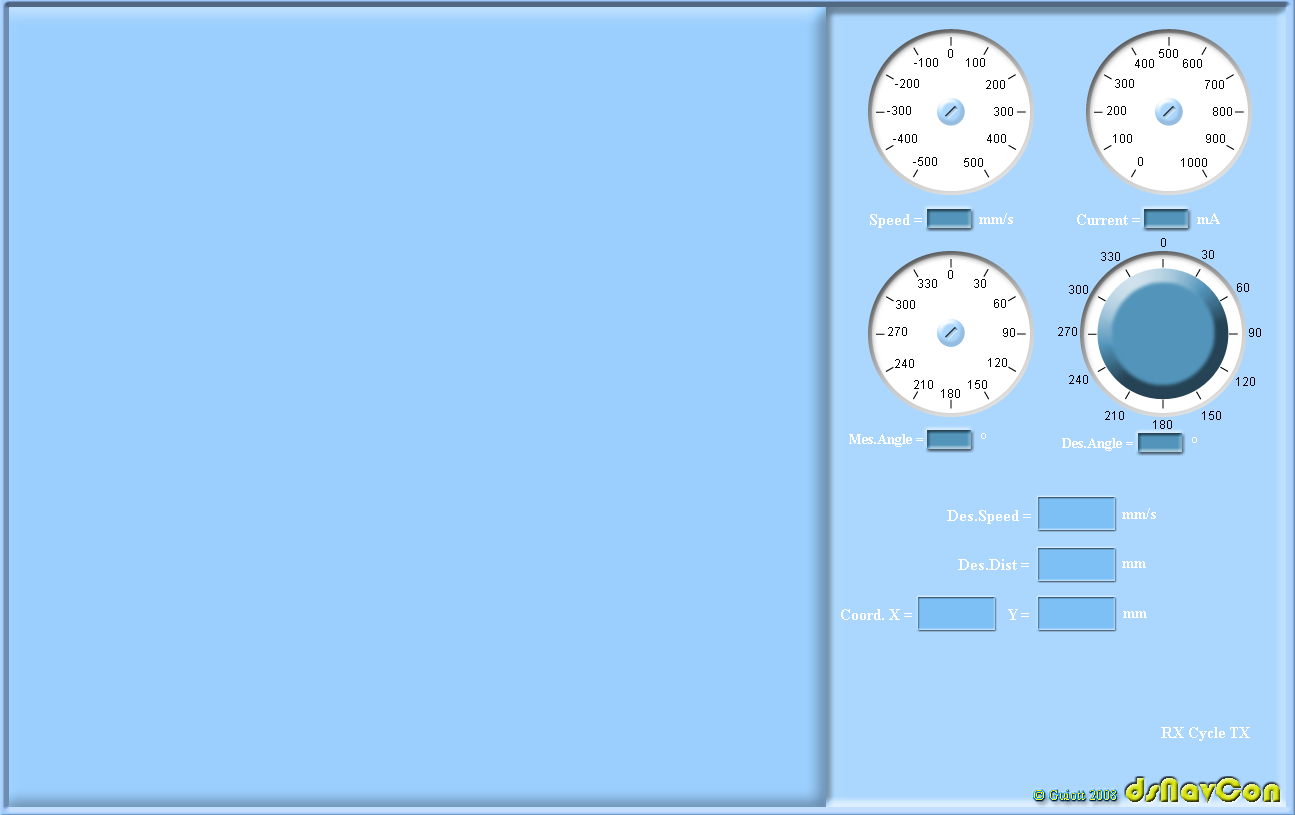
<style>
.page{position:relative;width:1295px;height:815px;background:#9bcffe}
.page>*{position:absolute;margin:0}
.t1{font:12px "ArialMT";color:#000000}
.t2{font:16px "TimesNewRomanPS-BoldMT";color:#ffffff}
.t3{font:14px "TimesNewRomanPS-BoldMT";color:#ffffff}
.t4{font:36px "Bauhaus93"}
.t5{font:14px "TimesNewRomanPSMT"}
</style>
<div class="page">
<p class="t1" style="left:948px;top:49px;width:5px;height:9px">0</p>
<p class="t1" style="left:1159px;top:49px;width:19px;height:9px">500</p>
<p class="t1" style="left:914px;top:58px;width:24px;height:9px">-100</p>
<p class="t1" style="left:966px;top:58px;width:19px;height:9px">100</p>
<p class="t1" style="left:1135px;top:59px;width:19px;height:9px">400</p>
<p class="t1" style="left:1183px;top:59px;width:19px;height:9px">600</p>
<p class="t1" style="left:895px;top:79px;width:24px;height:9px">-200</p>
<p class="t1" style="left:986px;top:80px;width:19px;height:9px">200</p>
<p class="t1" style="left:1115px;top:79px;width:19px;height:9px">300</p>
<p class="t1" style="left:1205px;top:80px;width:19px;height:9px">700</p>
<p class="t1" style="left:887px;top:106px;width:24px;height:9px">-300</p>
<p class="t1" style="left:994px;top:107px;width:19px;height:9px">300</p>
<p class="t1" style="left:1107px;top:106px;width:19px;height:9px">200</p>
<p class="t1" style="left:1213px;top:107px;width:19px;height:9px">800</p>
<p class="t1" style="left:893px;top:134px;width:24px;height:9px">-400</p>
<p class="t1" style="left:987px;top:134px;width:19px;height:9px">400</p>
<p class="t1" style="left:1113px;top:134px;width:19px;height:9px">100</p>
<p class="t1" style="left:1206px;top:134px;width:19px;height:9px">900</p>
<p class="t1" style="left:913px;top:157px;width:24px;height:9px">-500</p>
<p class="t1" style="left:964px;top:158px;width:19px;height:9px">500</p>
<p class="t1" style="left:1138px;top:157px;width:5px;height:9px">0</p>
<p class="t1" style="left:1181px;top:158px;width:26px;height:9px">1000</p>
<p class="t2" style="left:870px;top:214px;width:52px;height:14px">Speed =</p>
<p class="t2" style="left:979px;top:213px;width:34px;height:11px">mm/s</p>
<p class="t2" style="left:1077px;top:214px;width:63px;height:11px">Current =</p>
<p class="t2" style="left:1197px;top:213px;width:23px;height:11px">mA</p>
<p class="t1" style="left:1161px;top:238px;width:5px;height:9px">0</p>
<p class="t1" style="left:1101px;top:252px;width:19px;height:9px">330</p>
<p class="t1" style="left:1202px;top:250px;width:12px;height:9px">30</p>
<p class="t1" style="left:948px;top:270px;width:5px;height:9px">0</p>
<p class="t1" style="left:918px;top:279px;width:19px;height:9px">330</p>
<p class="t1" style="left:974px;top:279px;width:12px;height:9px">30</p>
<p class="t1" style="left:1069px;top:285px;width:19px;height:9px">300</p>
<p class="t1" style="left:1237px;top:283px;width:12px;height:9px">60</p>
<p class="t1" style="left:896px;top:300px;width:19px;height:9px">300</p>
<p class="t1" style="left:994px;top:299px;width:12px;height:9px">60</p>
<p class="t1" style="left:888px;top:327px;width:19px;height:9px">270</p>
<p class="t1" style="left:1003px;top:328px;width:12px;height:9px">90</p>
<p class="t1" style="left:1058px;top:327px;width:19px;height:9px">270</p>
<p class="t1" style="left:1249px;top:328px;width:12px;height:9px">90</p>
<p class="t1" style="left:895px;top:359px;width:19px;height:9px">240</p>
<p class="t1" style="left:988px;top:358px;width:19px;height:9px">120</p>
<p class="t1" style="left:1069px;top:375px;width:19px;height:9px">240</p>
<p class="t1" style="left:1236px;top:377px;width:19px;height:9px">120</p>
<p class="t1" style="left:914px;top:380px;width:19px;height:9px">210</p>
<p class="t1" style="left:941px;top:389px;width:19px;height:9px">180</p>
<p class="t1" style="left:968px;top:380px;width:19px;height:9px">150</p>
<p class="t1" style="left:1105px;top:411px;width:19px;height:9px">210</p>
<p class="t1" style="left:1202px;top:411px;width:19px;height:9px">150</p>
<p class="t1" style="left:1153px;top:420px;width:19px;height:9px">180</p>
<p class="t3" style="left:849px;top:434px;width:74px;height:13px">Mes.Angle =</p>
<p class="t2" style="left:981px;top:433px;width:5px;height:6px">°</p>
<p class="t3" style="left:1062px;top:438px;width:71px;height:13px">Des.Angle =</p>
<p class="t2" style="left:1192px;top:437px;width:5px;height:6px">°</p>
<p class="t2" style="left:947px;top:510px;width:84px;height:14px">Des.Speed =</p>
<p class="t2" style="left:1122px;top:508px;width:34px;height:11px">mm/s</p>
<p class="t2" style="left:958px;top:559px;width:71px;height:11px">Des.Dist =</p>
<p class="t2" style="left:1122px;top:561px;width:24px;height:7px">mm</p>
<p class="t2" style="left:841px;top:609px;width:71px;height:11px">Coord. X =</p>
<p class="t2" style="left:1008px;top:609px;width:21px;height:11px">Y =</p>
<p class="t2" style="left:1123px;top:611px;width:24px;height:7px">mm</p>
<p class="t2" style="left:1161px;top:727px;width:23px;height:11px">RX</p>
<p class="t2" style="left:1189px;top:727px;width:36px;height:14px">Cycle</p>
<p class="t2" style="left:1230px;top:727px;width:20px;height:11px">TX</p>
<p class="t4" style="left:1126px;top:778px;width:154px;height:25px">dsNavCon</p>
<p class="t5" style="left:1034px;top:790px;width:82px;height:10px">© Guiott 2008</p>
</div>
